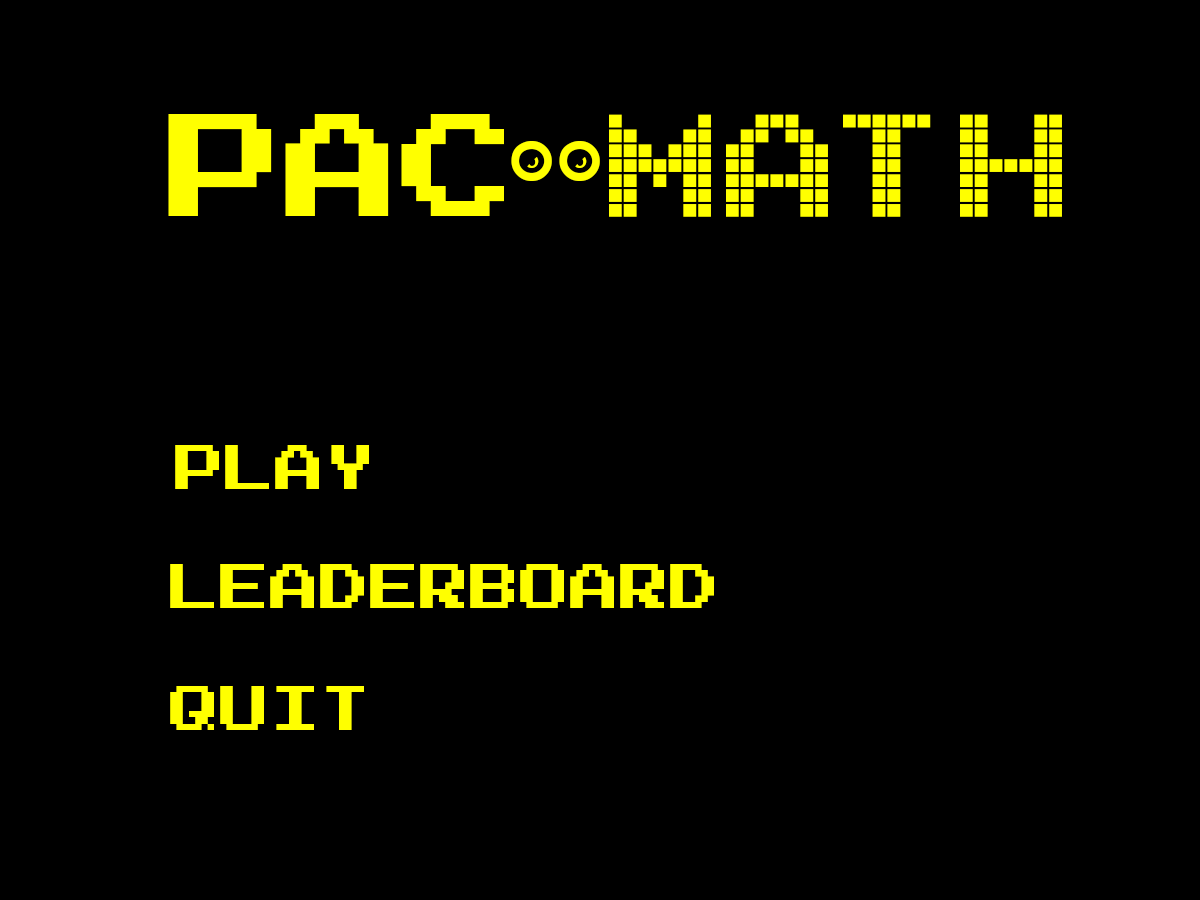
<style>
.page{position:relative;width:1200px;height:900px;background:#000000}
.page>*{position:absolute;margin:0}
.t1{font:116.7px "Emulogic";color:#ffff00}
.t2{font:125px "PacFontGood";color:#ffff00}
.t3{font:225px "Arcade";color:#ffff00}
.t4{font:50px "Emulogic";color:#ffff00}
</style>
<div class="page">
<p class="t1" style="left:168px;top:114px;width:432px;height:102px">Pac<span class="t2">::</span></p>
<p class="t3" style="left:609px;top:114px;width:453px;height:103px">MATH</p>
<p class="t4" style="left:175px;top:445px;width:194px;height:44px">PLAY</p>
<p class="t4" style="left:170px;top:564px;width:544px;height:44px">LEADERBOARD</p>
<p class="t4" style="left:170px;top:686px;width:194px;height:44px">QUIT</p>
</div>
